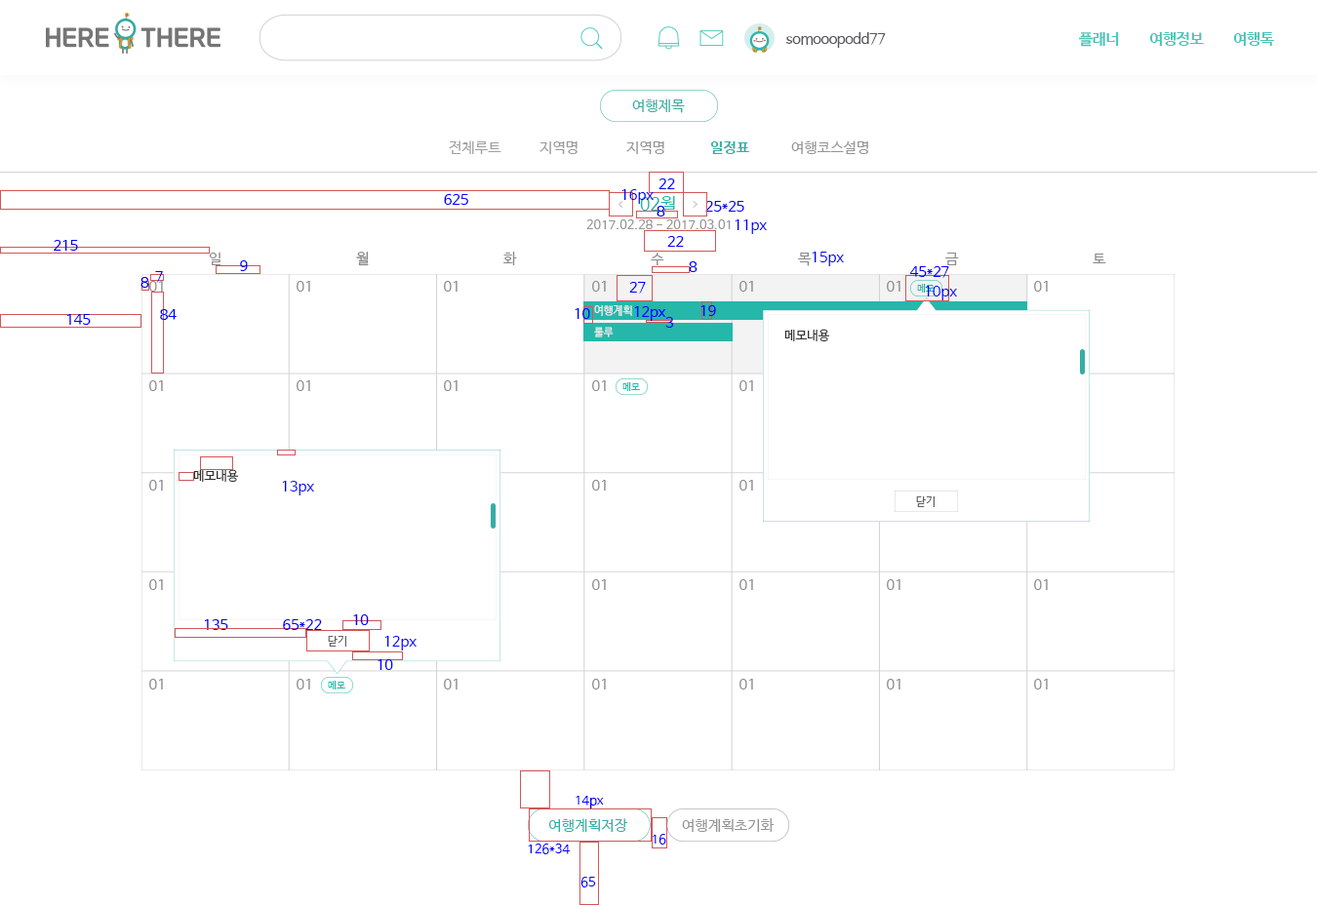
<style>
.page{position:relative;width:1317px;height:905px;background:#ffffff}
.page>*{position:absolute;margin:0}
.t1{font:14.5px "NanumBarunGothic";letter-spacing:-0.025em;color:#58595b}
.t2{font:15.4px "NanumBarunGothicBold";letter-spacing:-0.025em;color:#4bc5b9}
.t3{font:14.6px "NanumBarunGothic";color:#36ada4}
.t4{font:14.6px "NanumBarunGothic";color:#a0a0a0}
.t5{font:14.6px "NanumBarunGothic";color:#999a9a}
.t6{font:14.6px "NanumBarunGothic";color:#959595}
.t7{font:14.6px "NanumBarunGothicBold";color:#36ada4}
.t8{font:14.2px "NanumBarunGothic";color:#0000ff}
.t9{font:14.6px "NanumBarunGothic";color:#0000ff}
.t10{font:17.6px "NanumBarunGothic";color:#25b7aa}
.t11{font:12.7px "NanumBarunGothic";color:#959595}
.t12{font:14.6px "NanumBarunGothic";color:#898989}
.t13{font:9.8px "NanumBarunGothic";color:#25b7aa}
.t14{font:10.7px "NanumBarunGothic";color:#efefef}
.t15{font:12.7px "NanumBarunGothic";color:#313131}
.t16{font:10.7px "NanumBarunGothic";letter-spacing:0.025em;color:#626262}
.t17{font:12.7px "NanumBarunGothic";color:#0000ff}
</style>
<div class="page">
<p class="t1" style="left:786px;top:32px;width:100px;height:16px">somooopodd77</p>
<p class="t2" style="left:1078px;top:32px;width:41px;height:15px">플래너</p>
<p class="t2" style="left:1149px;top:32px;width:55px;height:14px">여행정보</p>
<p class="t2" style="left:1233px;top:32px;width:41px;height:14px">여행톡</p>
<p class="t3" style="left:632px;top:99px;width:53px;height:14px">여행제목</p>
<p class="t4" style="left:449px;top:140px;width:52px;height:14px">전체루트</p>
<p class="t5" style="left:540px;top:141px;width:38px;height:13px">지역명</p>
<p class="t6" style="left:626px;top:141px;width:38px;height:13px">지역명</p>
<p class="t7" style="left:710px;top:141px;width:39px;height:13px">일정표</p>
<p class="t6" style="left:791px;top:140px;width:77px;height:14px">여행코스설명</p>
<p class="t8" style="left:659px;top:179px;width:16px;height:10px">22</p>
<p class="t8" style="left:444px;top:194px;width:24px;height:11px">625</p>
<p class="t9" style="left:621px;top:189px;width:33px;height:15px">16px</p>
<p class="t10" style="left:640px;top:196px;width:36px;height:16px">02월</p>
<p class="t8" style="left:657px;top:206px;width:8px;height:11px">8</p>
<p class="t8" style="left:705px;top:201px;width:39px;height:11px">25*25</p>
<p class="t11" style="left:586px;top:220px;width:145px;height:9px">2017.02.28 - 2017.03.01</p>
<p class="t9" style="left:735px;top:220px;width:32px;height:14px">11px</p>
<p class="t8" style="left:54px;top:240px;width:24px;height:11px">215</p>
<p class="t8" style="left:667px;top:236px;width:17px;height:11px">22</p>
<p class="t12" style="left:209px;top:253px;width:12px;height:12px">일</p>
<p class="t12" style="left:356px;top:252px;width:13px;height:14px">월</p>
<p class="t12" style="left:503px;top:252px;width:14px;height:13px">화</p>
<p class="t12" style="left:651px;top:253px;width:13px;height:12px">수</p>
<p class="t12" style="left:798px;top:253px;width:14px;height:13px">목</p>
<p class="t9" style="left:812px;top:252px;width:32px;height:14px">15px</p>
<p class="t12" style="left:945px;top:253px;width:14px;height:12px">금</p>
<p class="t12" style="left:1093px;top:254px;width:13px;height:9px">토</p>
<p class="t8" style="left:240px;top:260px;width:8px;height:11px">9</p>
<p class="t8" style="left:689px;top:261px;width:9px;height:11px">8</p>
<p class="t8" style="left:909px;top:266px;width:40px;height:12px">45*27</p>
<p class="t8" style="left:140px;top:277px;width:9px;height:11px">8</p>
<p class="t12" style="left:149px;top:281px;width:14px;height:11px">01</p>
<p class="t8" style="left:155px;top:271px;width:8px;height:12px">7</p>
<p class="t12" style="left:297px;top:281px;width:13px;height:11px">01</p>
<p class="t12" style="left:444px;top:281px;width:14px;height:11px">01</p>
<p class="t12" style="left:592px;top:281px;width:14px;height:11px">01</p>
<p class="t8" style="left:629px;top:282px;width:17px;height:12px">27</p>
<p class="t12" style="left:740px;top:281px;width:13px;height:11px">01</p>
<p class="t12" style="left:887px;top:281px;width:13px;height:11px">01</p>
<p class="t12" style="left:1034px;top:281px;width:14px;height:11px">01</p>
<p class="t13" style="left:917px;top:284px;width:18px;height:9px">메모</p>
<p class="t9" style="left:925px;top:286px;width:32px;height:14px">10px</p>
<p class="t14" style="left:594px;top:305px;width:38px;height:11px">여행계획</p>
<p class="t8" style="left:700px;top:305px;width:16px;height:11px">19</p>
<p class="t8" style="left:67px;top:314px;width:24px;height:11px">145</p>
<p class="t8" style="left:160px;top:309px;width:17px;height:11px">84</p>
<p class="t8" style="left:575px;top:308px;width:15px;height:11px">10</p>
<p class="t8" style="left:634px;top:306px;width:32px;height:15px">12px</p>
<p class="t8" style="left:665px;top:317px;width:9px;height:11px">3</p>
<p class="t14" style="left:594px;top:327px;width:20px;height:11px">룰루</p>
<p class="t15" style="left:784px;top:329px;width:46px;height:13px">메모내용</p>
<p class="t12" style="left:149px;top:380px;width:14px;height:11px">01</p>
<p class="t12" style="left:297px;top:380px;width:13px;height:11px">01</p>
<p class="t12" style="left:444px;top:380px;width:14px;height:11px">01</p>
<p class="t12" style="left:592px;top:380px;width:14px;height:11px">01</p>
<p class="t13" style="left:622px;top:382px;width:18px;height:9px">메모</p>
<p class="t12" style="left:740px;top:380px;width:13px;height:11px">01</p>
<p class="t15" style="left:193px;top:469px;width:46px;height:14px">메모내용</p>
<p class="t12" style="left:149px;top:480px;width:14px;height:11px">01</p>
<p class="t9" style="left:282px;top:481px;width:32px;height:15px">13px</p>
<p class="t12" style="left:592px;top:480px;width:14px;height:11px">01</p>
<p class="t12" style="left:740px;top:480px;width:13px;height:11px">01</p>
<p class="t16" style="left:916px;top:497px;width:19px;height:10px">닫기</p>
<p class="t12" style="left:149px;top:580px;width:14px;height:10px">01</p>
<p class="t12" style="left:592px;top:580px;width:14px;height:10px">01</p>
<p class="t12" style="left:740px;top:580px;width:13px;height:10px">01</p>
<p class="t12" style="left:887px;top:580px;width:13px;height:10px">01</p>
<p class="t12" style="left:1034px;top:580px;width:14px;height:10px">01</p>
<p class="t8" style="left:353px;top:615px;width:16px;height:10px">10</p>
<p class="t8" style="left:205px;top:620px;width:23px;height:10px">135</p>
<p class="t8" style="left:283px;top:620px;width:39px;height:10px">65*22</p>
<p class="t16" style="left:328px;top:636px;width:18px;height:11px">닫기</p>
<p class="t9" style="left:384px;top:636px;width:33px;height:15px">12px</p>
<p class="t8" style="left:378px;top:660px;width:15px;height:10px">10</p>
<p class="t12" style="left:149px;top:679px;width:14px;height:11px">01</p>
<p class="t12" style="left:297px;top:679px;width:13px;height:11px">01</p>
<p class="t13" style="left:328px;top:681px;width:17px;height:9px">메모</p>
<p class="t12" style="left:444px;top:679px;width:14px;height:11px">01</p>
<p class="t12" style="left:592px;top:679px;width:14px;height:11px">01</p>
<p class="t12" style="left:740px;top:679px;width:13px;height:11px">01</p>
<p class="t12" style="left:887px;top:679px;width:13px;height:11px">01</p>
<p class="t12" style="left:1034px;top:679px;width:14px;height:11px">01</p>
<p class="t17" style="left:576px;top:796px;width:28px;height:13px">14px</p>
<p class="t3" style="left:548px;top:819px;width:80px;height:13px">여행계획저장</p>
<p class="t6" style="left:682px;top:819px;width:93px;height:13px">여행계획초기화</p>
<p class="t17" style="left:528px;top:844px;width:42px;height:11px">126*34</p>
<p class="t17" style="left:653px;top:834px;width:13px;height:11px">16</p>
<p class="t17" style="left:580px;top:877px;width:16px;height:11px">65</p>
</div>
